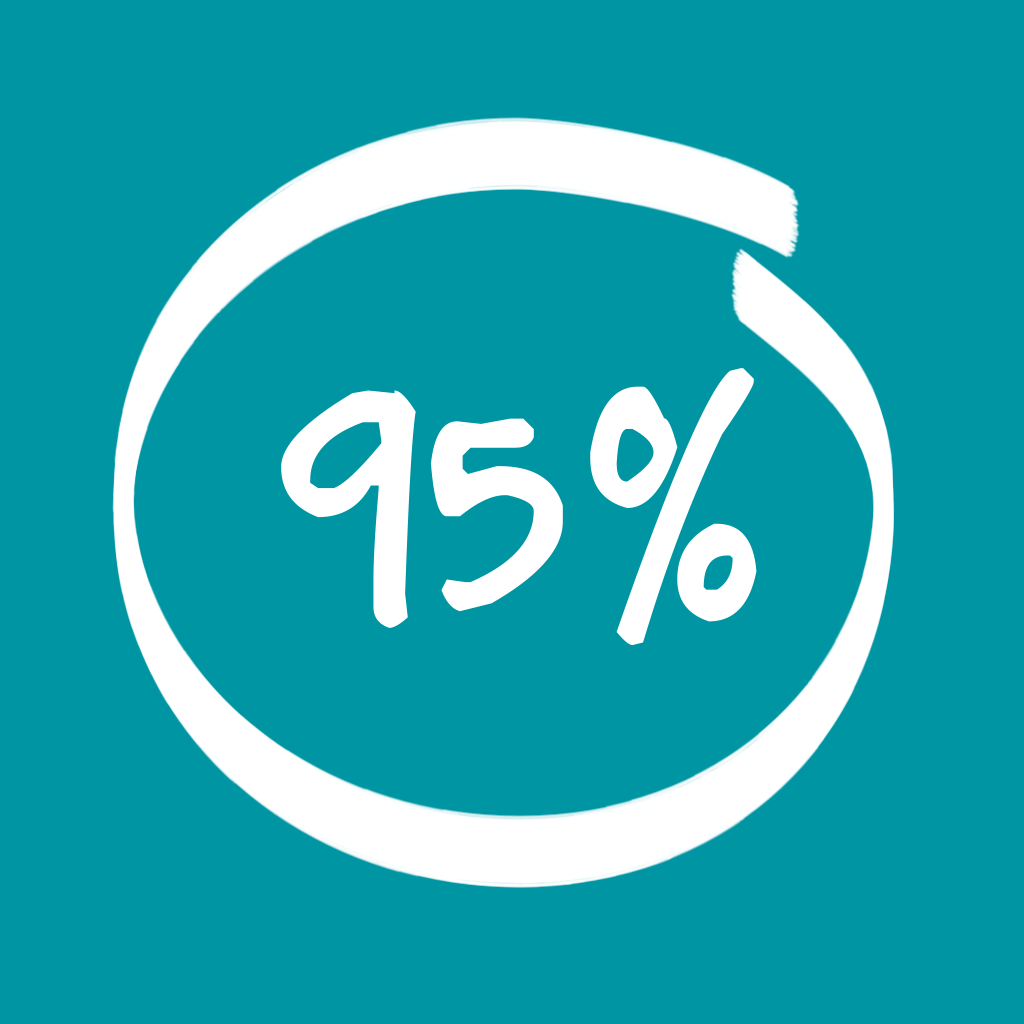
<style>
.page{position:relative;width:1024px;height:1024px;background:#0095a3}
.page>*{position:absolute;margin:0}
.t1{font:360px "CompleteinHim";color:#ffffff;text-transform:uppercase}
</style>
<div class="page">
<p class="t1" style="left:281px;top:368px;width:476px;height:278px">95%</p>
</div>
